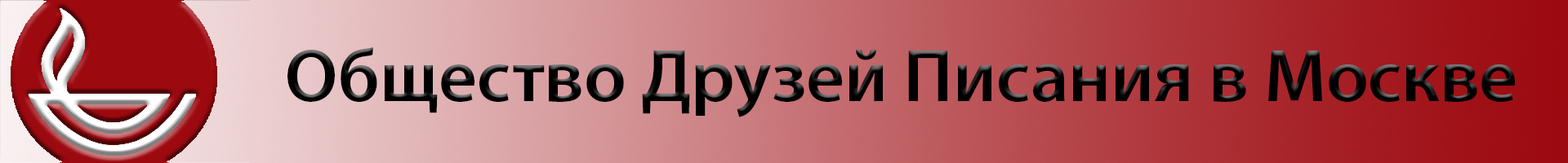
<style>
.page{position:relative;width:1568px;height:163px}
.page>*{position:absolute;margin:0}
.t1{font:74.9px "MyriadPro-Semibold";color:#010000}
</style>
<div class="page">
<p class="t1" style="left:287px;top:47px;width:1228px;height:71px">Общество Друзей Писания в Mоскве</p>
</div>
